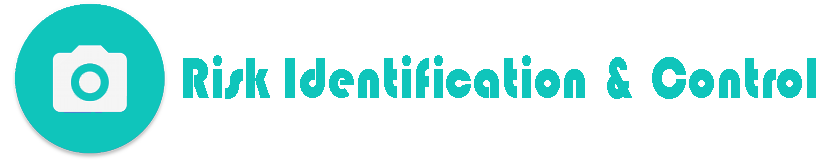
<style>
.page{position:relative;width:831px;height:160px;background:#ffffff}
.page>*{position:absolute;margin:0}
.t1{font:60.4px "Bauhaus93";letter-spacing:0.01em;color:#0fc5bb;scale:0.81 1}
</style>
<div class="page">
<p class="t1" style="left:183px;top:55px;width:633px;height:44px">Risk Identification &amp; Control</p>
</div>
